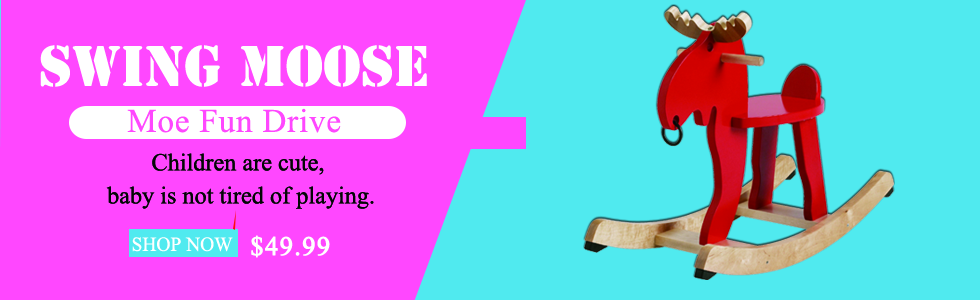
<style>
.page{position:relative;width:980px;height:300px;background:#50eaef}
.page>*{position:absolute;margin:0}
.t1{font:52.9px "StencilStd";color:#ffffff}
.t2{font:33.1px "IskoolaPota";letter-spacing:0.025em;color:#ff47ff}
.t3{font:24.2px/33.1px "IskoolaPota";color:#040606}
.t4{font:19.9px "IskoolaPota";color:#ffffff}
.t5{font:26.4px "IskoolaPota";letter-spacing:0.025em;color:#ffffff;font-weight:bold}
</style>
<div class="page">
<p class="t1" style="left:40px;top:45px;width:387px;height:42px">Swing Moose</p>
<p class="t2" style="left:127px;top:108px;width:214px;height:25px">Moe Fun Drive</p>
<p class="t3" style="left:106px;top:153px;width:268px;height:56px;text-align:center">Children are cute, <br>baby is not tired of playing.</p>
<p class="t4" style="left:132px;top:237px;width:101px;height:15px">SHOP NOW</p>
<p class="t5" style="left:251px;top:235px;width:79px;height:23px">$49.99</p>
</div>
